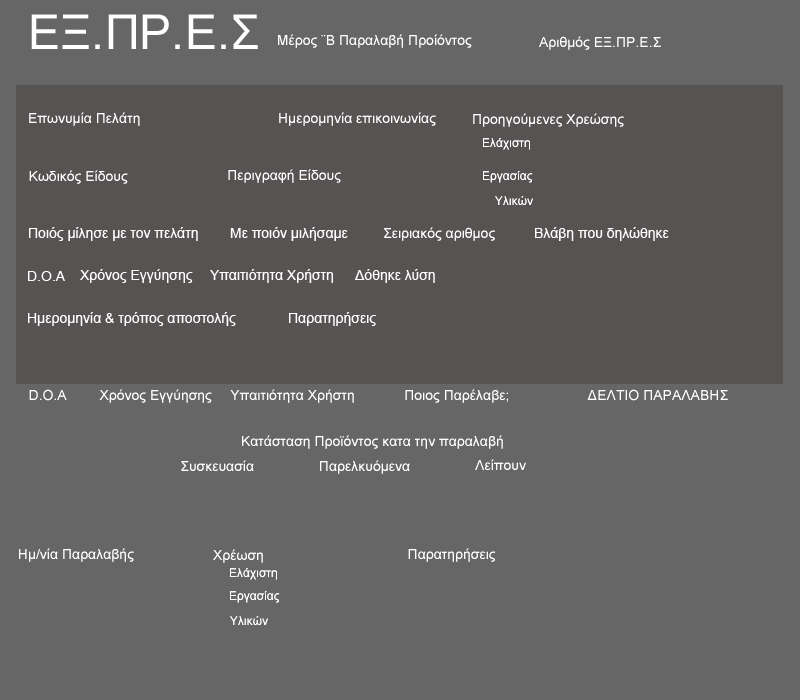
<style>
.page{position:relative;width:800px;height:700px;background:#666666}
.page>*{position:absolute;margin:0}
.t1{font:48px "ArialMT";color:#ffffff}
.t2{font:14px "ArialMT";color:#ffffff}
.t3{font:12px "ArialMT";color:#ffffff}
</style>
<div class="page">
<p class="t1" style="left:31px;top:14px;width:227px;height:35px">ΕΞ.ΠΡ.Ε.Σ</p>
<p class="t2" style="left:278px;top:34px;width:194px;height:14px">Μέρος ¨Β Παραλαβή Προίόντος</p>
<p class="t2" style="left:539px;top:36px;width:122px;height:14px">Αριθμός ΕΞ.ΠΡ.Ε.Σ</p>
<p class="t2" style="left:29px;top:112px;width:111px;height:14px">Επωνυμία Πελάτη</p>
<p class="t2" style="left:279px;top:112px;width:157px;height:14px">Ημερομηνία επικοινωνίας</p>
<p class="t2" style="left:473px;top:113px;width:151px;height:14px">Προηγούμενες Χρεώσης</p>
<p class="t3" style="left:483px;top:138px;width:47px;height:12px">Ελάχιστη</p>
<p class="t2" style="left:29px;top:170px;width:99px;height:14px">Κωδικός Είδους</p>
<p class="t2" style="left:228px;top:169px;width:113px;height:14px">Περιγραφή Είδους</p>
<p class="t3" style="left:483px;top:171px;width:50px;height:12px">Εργασίας</p>
<p class="t3" style="left:495px;top:196px;width:38px;height:9px">Υλικών</p>
<p class="t2" style="left:29px;top:227px;width:169px;height:14px">Ποιός μίλησε με τον πελάτη</p>
<p class="t2" style="left:230px;top:227px;width:118px;height:14px">Με ποιόν μιλήσαμε</p>
<p class="t2" style="left:384px;top:227px;width:111px;height:14px">Σειριακός αριθμος</p>
<p class="t2" style="left:535px;top:227px;width:134px;height:14px">Βλάβη που δηλώθηκε</p>
<p class="t2" style="left:80px;top:269px;width:113px;height:14px">Χρόνος Εγγύησης</p>
<p class="t2" style="left:210px;top:269px;width:123px;height:14px">Υπαιτιότητα Χρήστη</p>
<p class="t2" style="left:355px;top:269px;width:80px;height:14px">Δόθηκε λύση</p>
<p class="t2" style="left:28px;top:271px;width:37px;height:10px">D.O.A</p>
<p class="t2" style="left:28px;top:312px;width:208px;height:14px">Ημερομηνία &amp; τρόπος αποστολής</p>
<p class="t2" style="left:289px;top:312px;width:87px;height:14px">Παρατηρήσεις</p>
<p class="t2" style="left:29px;top:389px;width:38px;height:12px">D.O.A</p>
<p class="t2" style="left:99px;top:389px;width:113px;height:14px">Χρόνος Εγγύησης</p>
<p class="t2" style="left:230px;top:389px;width:124px;height:14px">Υπαιτιότητα Χρήστη</p>
<p class="t2" style="left:405px;top:389px;width:103px;height:14px">Ποιος Παρέλαβε;</p>
<p class="t2" style="left:587px;top:389px;width:141px;height:12px">ΔΕΛΤΙΟ ΠΑΡΑΛΑΒΗΣ</p>
<p class="t2" style="left:242px;top:435px;width:261px;height:14px">Κατάσταση Προϊόντος κατα την παραλαβή</p>
<p class="t2" style="left:181px;top:460px;width:73px;height:11px">Συσκευασία</p>
<p class="t2" style="left:320px;top:460px;width:90px;height:14px">Παρελκυόμενα</p>
<p class="t2" style="left:475px;top:459px;width:51px;height:11px">Λείπουν</p>
<p class="t2" style="left:19px;top:548px;width:115px;height:14px">Ημ/νία Παραλαβής</p>
<p class="t2" style="left:213px;top:549px;width:50px;height:14px">Χρέωση</p>
<p class="t2" style="left:408px;top:548px;width:88px;height:14px">Παρατηρήσεις</p>
<p class="t3" style="left:230px;top:568px;width:47px;height:12px">Ελάχιστη</p>
<p class="t3" style="left:230px;top:591px;width:50px;height:12px">Εργασίας</p>
<p class="t3" style="left:230px;top:616px;width:38px;height:9px">Υλικών</p>
</div>
